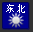
<style>
.page{position:relative;width:33px;height:32px;background:#000090}
.page>*{position:absolute;margin:0}
.t1{font:10.4px "SimSun";color:#ffffff}
</style>
<div class="page">
<p class="t1" style="left:6px;top:4px;width:19px;height:9px">东北</p>
</div>
